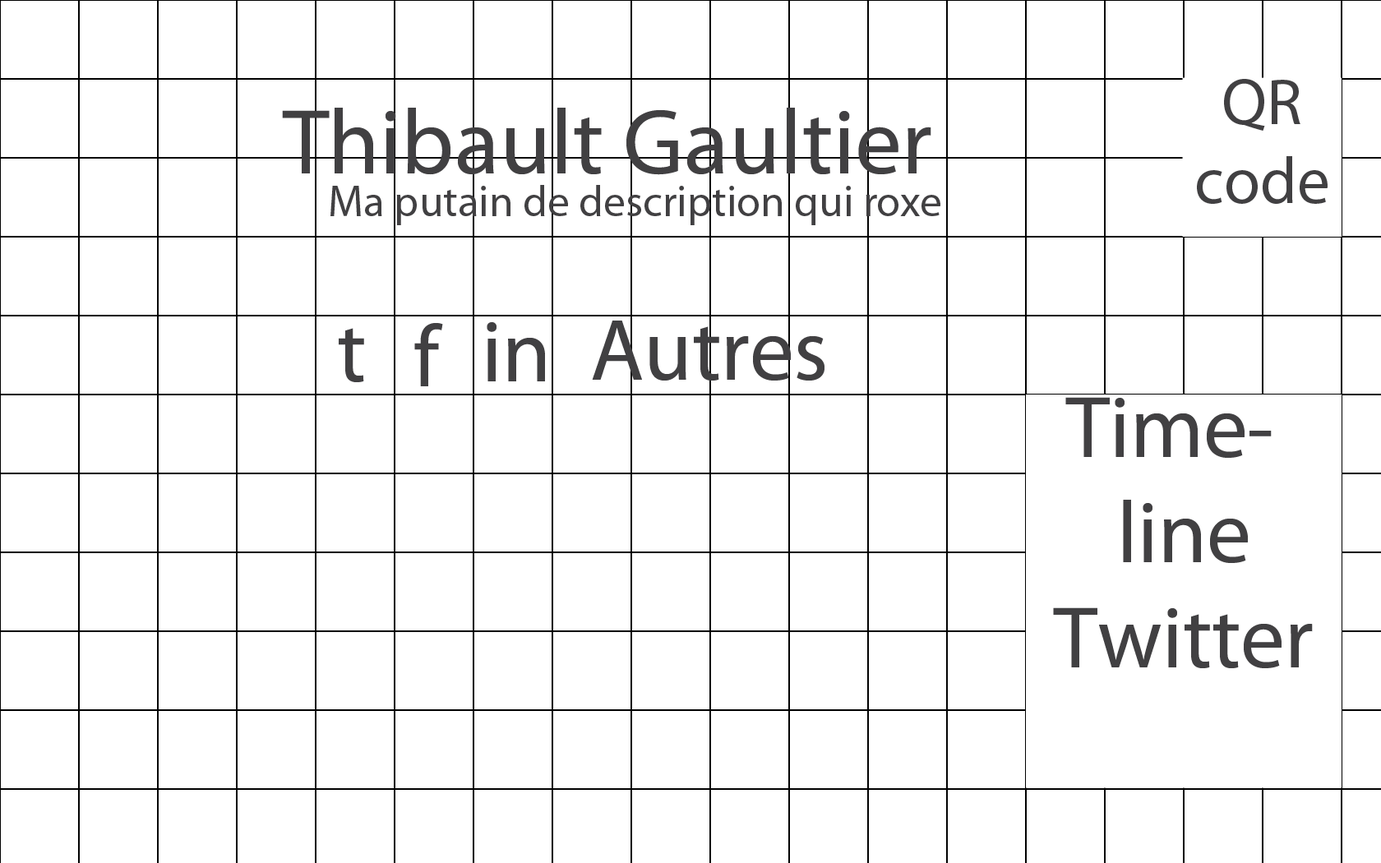
<style>
.page{position:relative;width:1381px;height:863px;background:#ffffff}
.page>*{position:absolute;margin:0}
.t1{font:65.8px "MyriadPro-Regular";color:#414042}
.t2{font:93.2px "MyriadPro-Regular";color:#414042}
.t3{font:43.8px "MyriadPro-Regular";color:#414042}
.t4{font:87.7px "MyriadPro-Regular";color:#414042}
</style>
<div class="page">
<p class="t1" style="left:1197px;top:79px;width:131px;height:125px;text-align:center">QR code</p>
<p class="t2" style="left:282px;top:108px;width:650px;height:67px">Thibault Gaultier</p>
<p class="t3" style="left:331px;top:185px;width:610px;height:40px">Ma putain de description qui roxe</p>
<p class="t4" style="left:339px;top:328px;width:25px;height:54px">t</p>
<p class="t4" style="left:414px;top:323px;width:29px;height:63px">f</p>
<p class="t4" style="left:487px;top:322px;width:58px;height:59px">in</p>
<p class="t4" style="left:592px;top:321px;width:233px;height:60px">Autres</p>
<p class="t4" style="left:1053px;top:397px;width:260px;height:271px;text-align:center">Time-line Twitter</p>
</div>
